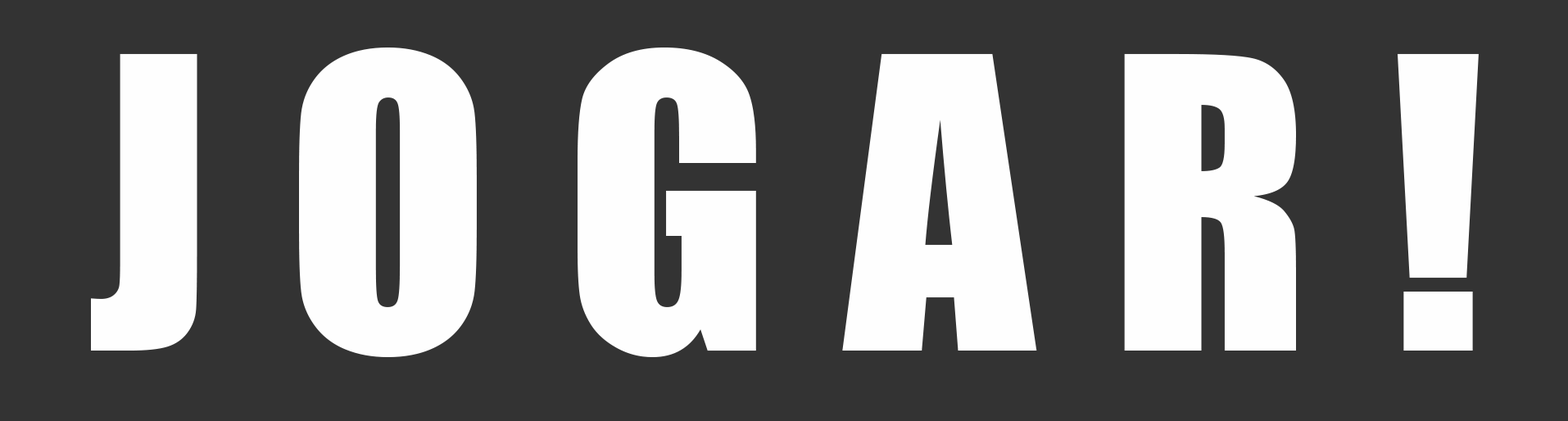
<style>
.page{position:relative;width:1568px;height:421px;background:#333333}
.page>*{position:absolute;margin:0}
.t1{font:375.3px "Impact";letter-spacing:0.2em;color:#fefefe;text-transform:uppercase}
</style>
<div class="page">
<p class="t1" style="left:91px;top:47px;width:1388px;height:310px">JOGAR!</p>
</div>
